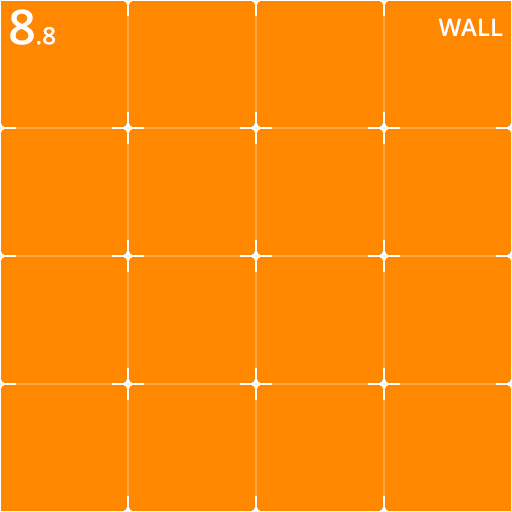
<style>
.page{position:relative;width:512px;height:512px;background:#ff8800}
.page>*{position:absolute;margin:0}
.t1{font:24px "OpenSans-Semibold";color:#ffffff}
.t2{font:48px "OpenSans-Semibold";color:#ffffff}
</style>
<div class="page">
<p class="t1" style="left:10px;top:9px;width:45px;height:36px"><span class="t2">8</span>.8</p>
<p class="t1" style="left:438px;top:18px;width:65px;height:18px">WALL</p>
</div>
